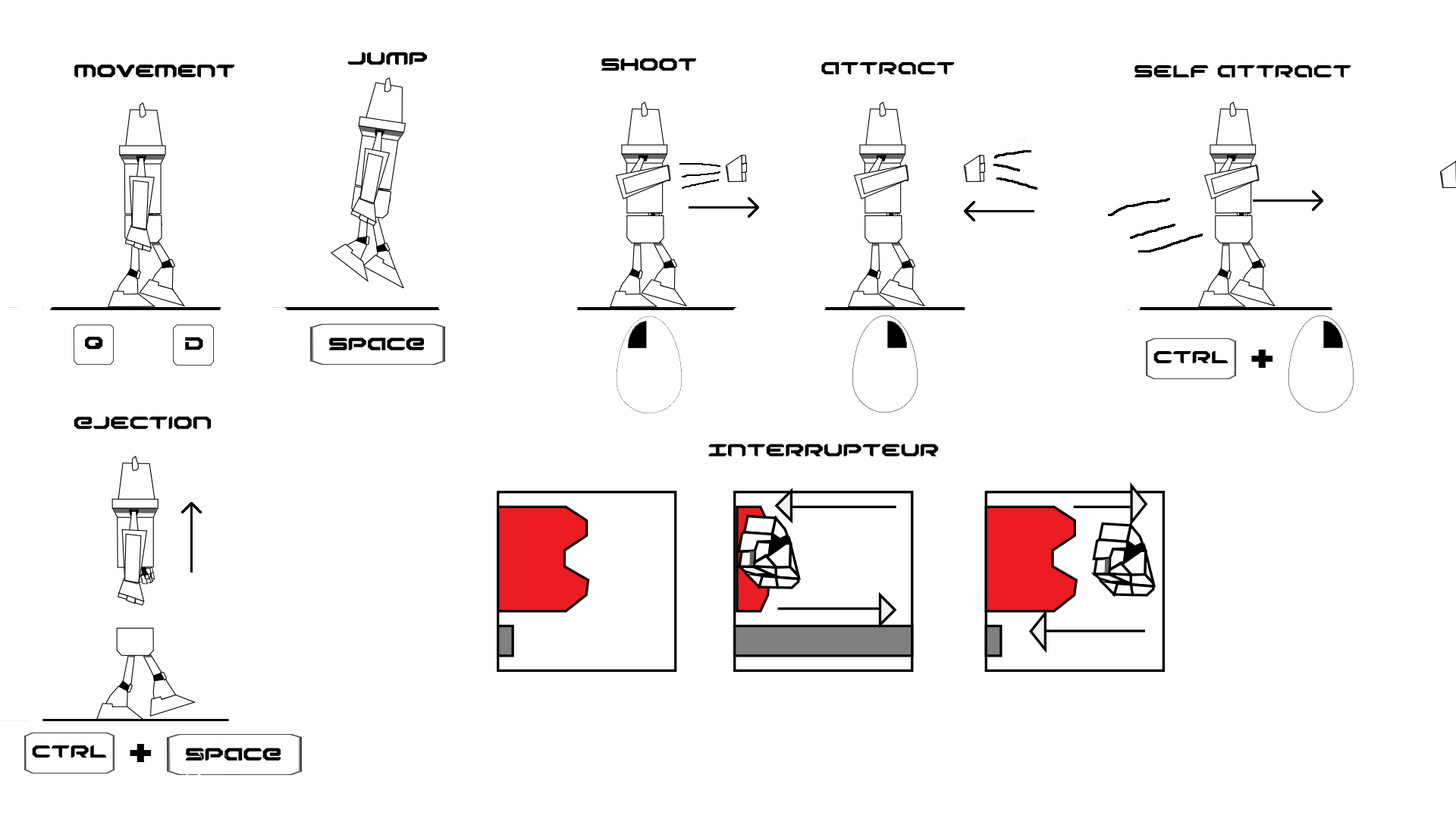
<style>
.page{position:relative;width:1456px;height:819px;background:#ffffff}
.page>*{position:absolute;margin:0}
.t1{font:18.2px "RobotaurExpanded";color:#000000}
</style>
<div class="page">
<p class="t1" style="left:347px;top:52px;width:80px;height:13px">JUMP</p>
<p class="t1" style="left:74px;top:64px;width:160px;height:13px">movement</p>
<p class="t1" style="left:601px;top:58px;width:95px;height:13px">Shoot</p>
<p class="t1" style="left:821px;top:62px;width:134px;height:12px">Attract</p>
<p class="t1" style="left:1134px;top:65px;width:217px;height:12px">self Attract</p>
<p class="t1" style="left:74px;top:416px;width:138px;height:13px">Ejection</p>
<p class="t1" style="left:708px;top:444px;width:231px;height:13px">Interrupteur</p>
</div>
